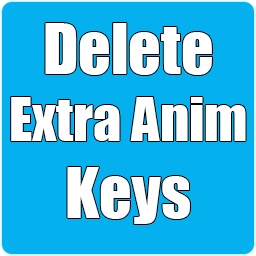
<style>
.page{position:relative;width:256px;height:256px;background:#05b0ef}
.page>*{position:absolute;margin:0}
.t1{font:56px "Impact";color:#ffffff}
.t2{font:64px "Impact";color:#ffffff}
</style>
<div class="page">
<p class="t1" style="left:11px;top:23px;width:235px;height:201px;text-align:center"><span class="t2">Delete<br></span>Extra Anim<br><span class="t2">Keys</span></p>
</div>
